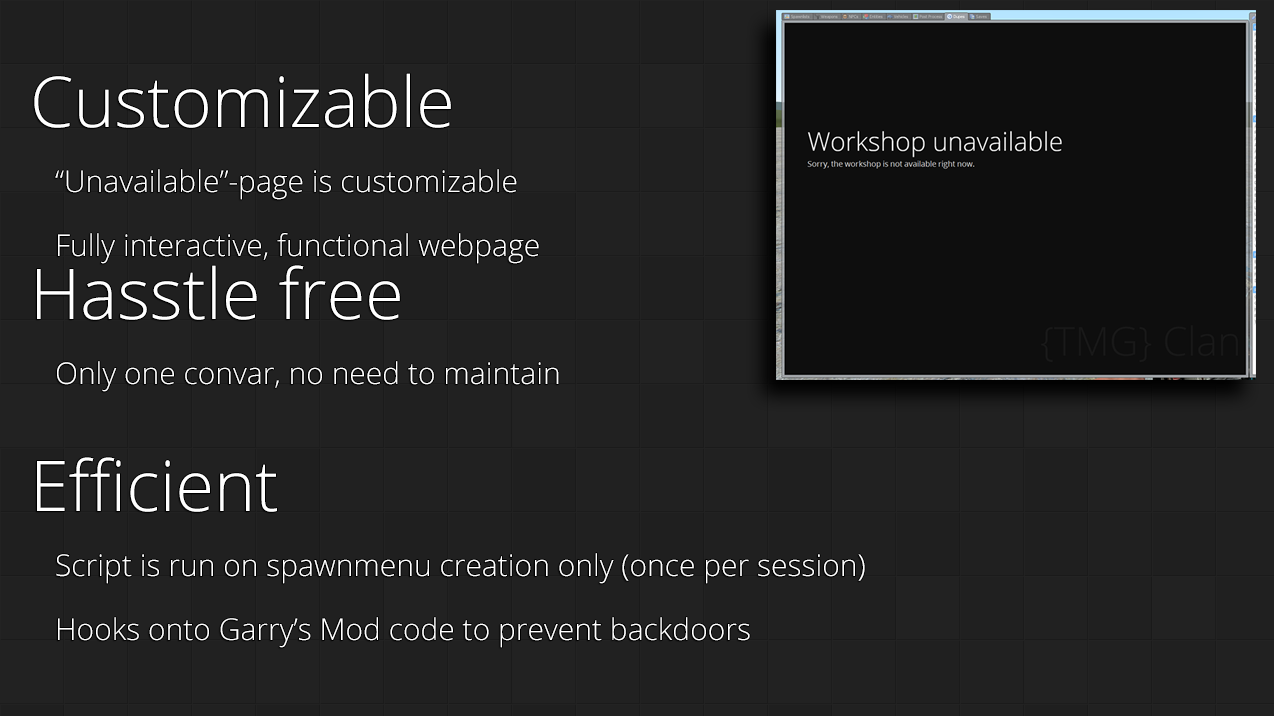
<style>
.page{position:relative;width:1274px;height:716px;background:#212121}
.page>*{position:absolute;margin:0}
.t1{font:70px/64px "OpenSans-Light";color:#ffffff}
.t2{font:30px/64px "OpenSans-Light";color:#ffffff}
</style>
<div class="page">
<p class="t1" style="left:34px;top:73px;width:417px;height:439px">Customizable<br><br><br>Hasstle free<br><br><br>Efficient</p>
<p class="t2" style="left:55px;top:169px;width:810px;height:479px">“Unavailable”-page is customizable<br>Fully interactive, functional webpage<br><br>Only one convar, no need to maintain<br><br><br>Script is run on spawnmenu creation only (once per session)<br>Hooks onto Garry’s Mod code to prevent backdoors</p>
</div>
